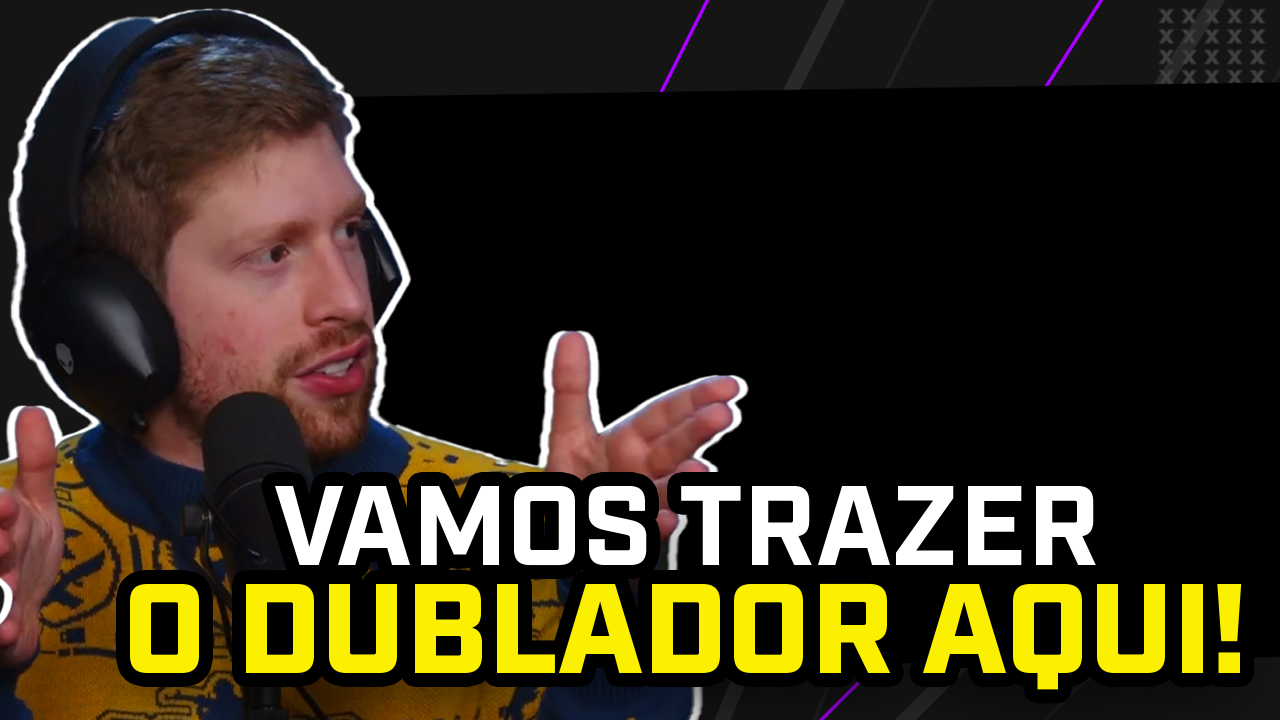
<style>
.page{position:relative;width:1280px;height:720px;background:#000000}
.page>*{position:absolute;margin:0}
.t1{font:113.3px "Industry-Bold";color:#ffffff}
.t2{font:127px "Industry-Black";color:#faf000}
</style>
<div class="page">
<p class="t1" style="left:275px;top:486px;width:821px;height:80px">VAMOS TRAZER</p>
<p class="t2" style="left:130px;top:583px;width:1112px;height:107px">O DUBLADOR AQUI!</p>
</div>
